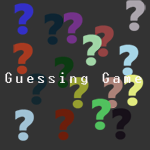
<style>
.page{position:relative;width:150px;height:150px;background:#333333}
.page>*{position:absolute;margin:0}
.t1{font:14.4px "Terminal";color:#fefafa}
</style>
<div class="page">
<p class="t1" style="left:5px;top:72px;width:137px;height:13px">Guessing Game</p>
</div>
